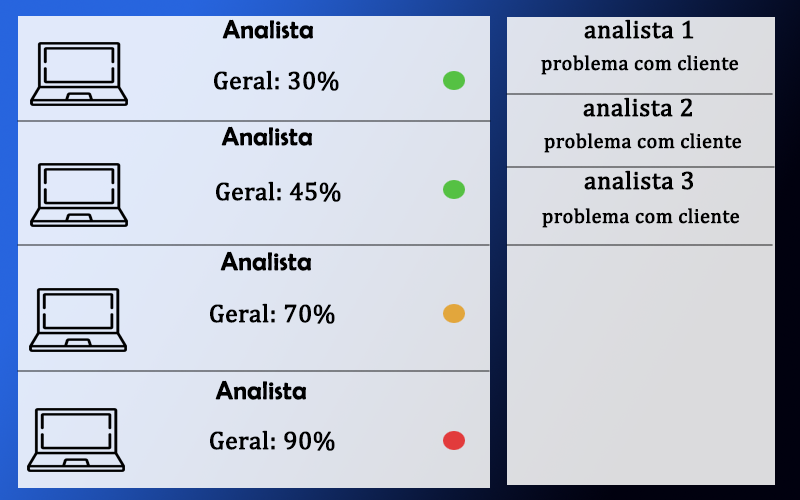
<style>
.page{position:relative;width:800px;height:500px}
.page>*{position:absolute;margin:0}
.t1{font:25.4px "BerlinSansFB-Reg";color:#000000;font-weight:bold}
.t2{font:25.4px "Cambria";color:#000000;font-weight:bold}
.t3{font:20.3px "Cambria";color:#000000;font-weight:bold}
</style>
<div class="page">
<p class="t1" style="left:222px;top:19px;width:92px;height:20px">Analista</p>
<p class="t2" style="left:584px;top:19px;width:110px;height:20px">analista 1</p>
<p class="t3" style="left:541px;top:55px;width:198px;height:20px">problema com cliente</p>
<p class="t2" style="left:214px;top:70px;width:125px;height:21px">Geral: 30%</p>
<p class="t2" style="left:583px;top:97px;width:109px;height:20px">analista 2</p>
<p class="t1" style="left:221px;top:126px;width:92px;height:20px">Analista</p>
<p class="t3" style="left:544px;top:133px;width:198px;height:20px">problema com cliente</p>
<p class="t2" style="left:584px;top:170px;width:109px;height:20px">analista 3</p>
<p class="t2" style="left:216px;top:181px;width:125px;height:21px">Geral: 45%</p>
<p class="t3" style="left:542px;top:208px;width:198px;height:20px">problema com cliente</p>
<p class="t1" style="left:220px;top:251px;width:92px;height:20px">Analista</p>
<p class="t2" style="left:210px;top:303px;width:125px;height:21px">Geral: 70%</p>
<p class="t1" style="left:215px;top:380px;width:92px;height:20px">Analista</p>
<p class="t2" style="left:210px;top:430px;width:125px;height:21px">Geral: 90%</p>
</div>
